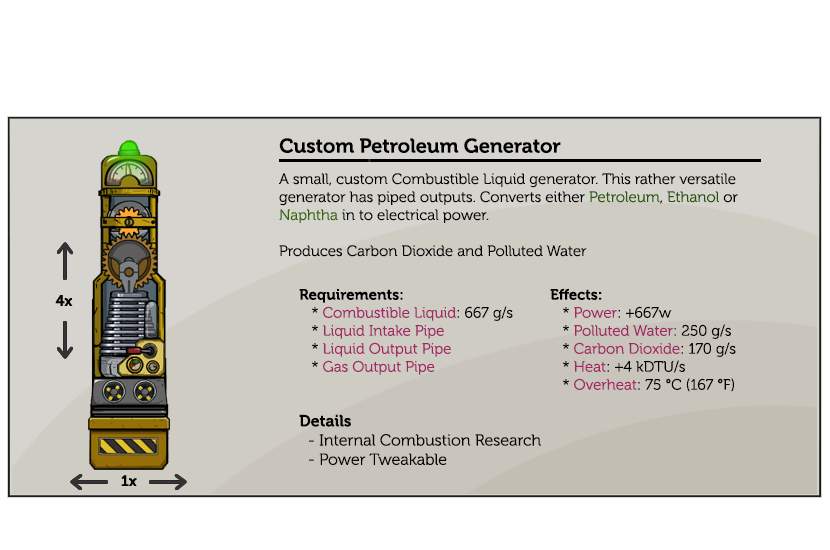
<style>
.page{position:relative;width:830px;height:550px;background:#ffffff}
.page>*{position:absolute;margin:0}
.t1{font:20px "Museo-700";color:#000000}
.t2{font:15px "Museo-300";color:#000000}
.t3{font:15px "Museo-300";color:#2c5904}
.t4{font:15px "Museo-300";color:#265601}
.t5{font:15px "Museo-300";color:#366701}
.t6{font:15px "Museo-700";color:#000000}
.t7{font:15px "Museo-300";color:#a12864}
.t8{font:16px "Museo-300";color:#040403}
.t9{font:16px "Museo-700";color:#040403}
</style>
<div class="page">
<p class="t1" style="left:279px;top:138px;width:282px;height:15px">Custom Petroleum Generator</p>
<p class="t2" style="left:279px;top:173px;width:459px;height:84px">A small, custom Combustible Liquid generator. This rather versatile generator has piped outputs. Converts either <span class="t3">Petroleum</span>, <span class="t4">Ethanol</span> or <span class="t5">Naphtha</span> in to electrical power.<br><br>Produces Carbon Dioxide and Polluted Water</p>
<p class="t2" style="left:299px;top:289px;width:214px;height:86px"><span class="t6">Requirements:</span><br>   * <span class="t7">Combustible Liquid</span>: 667 g/s                    <br>   * <span class="t7">Liquid Intake Pipe<br></span>   * <span class="t7">Liquid Output Pipe<br></span>   * <span class="t7">Gas Output Pipe</span></p>
<p class="t2" style="left:550px;top:288px;width:186px;height:104px"><span class="t6">Effects:</span><br>   * <span class="t7">Power</span>: +667w                   <br>   * <span class="t7">Polluted Water</span>: 250 g/s<br>   * <span class="t7">Carbon Dioxide</span>: 170 g/s<br>   * <span class="t7">Heat</span>: +4 kDTU/s<br>   * <span class="t7">Overheat</span>: 75 °C (167 °F)</p>
<p class="t8" style="left:299px;top:414px;width:242px;height:51px"><span class="t9">Details<br></span>  - Internal Combustion Research<br>  - Power Tweakable</p>
</div>
